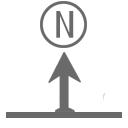
<style>
.page{position:relative;width:128px;height:128px;background:#ffffff}
.page>*{position:absolute;margin:0}
.t1{font:30px "TVpl";letter-spacing:0.05em;color:#6a6a6a}
</style>
<div class="page">
<p class="t1" style="left:56px;top:11px;width:18px;height:27px">N</p>
</div>
